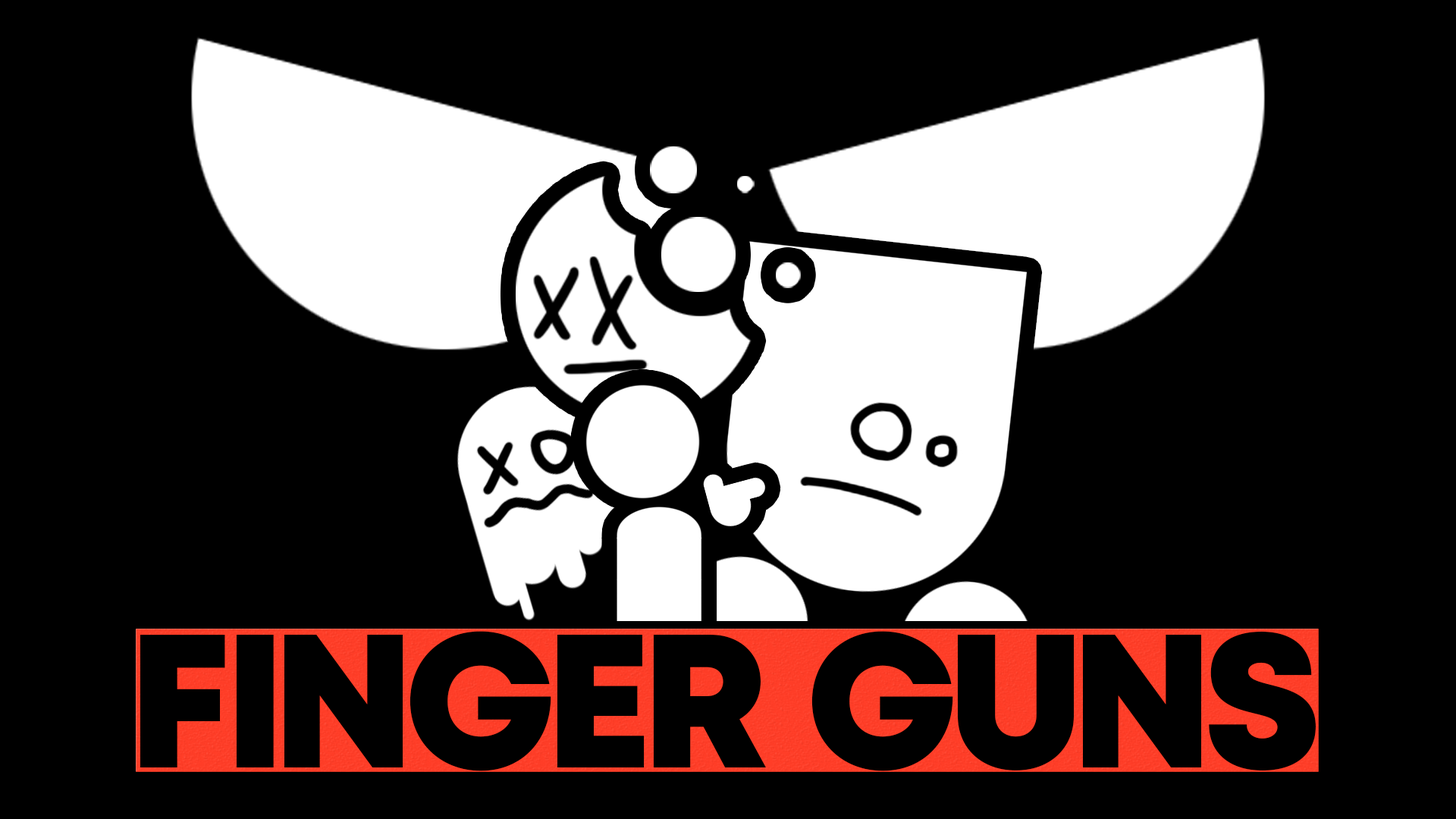
<style>
.page{position:relative;width:1456px;height:819px;background:#000000}
.page>*{position:absolute;margin:0}
.t1{font:189.6px "Mont-HeavyDEMO";letter-spacing:-0.08em;color:#000000;text-transform:uppercase}
</style>
<div class="page">
<p class="t1" style="left:140px;top:631px;width:1176px;height:140px">FINGER  GUNS</p>
</div>
